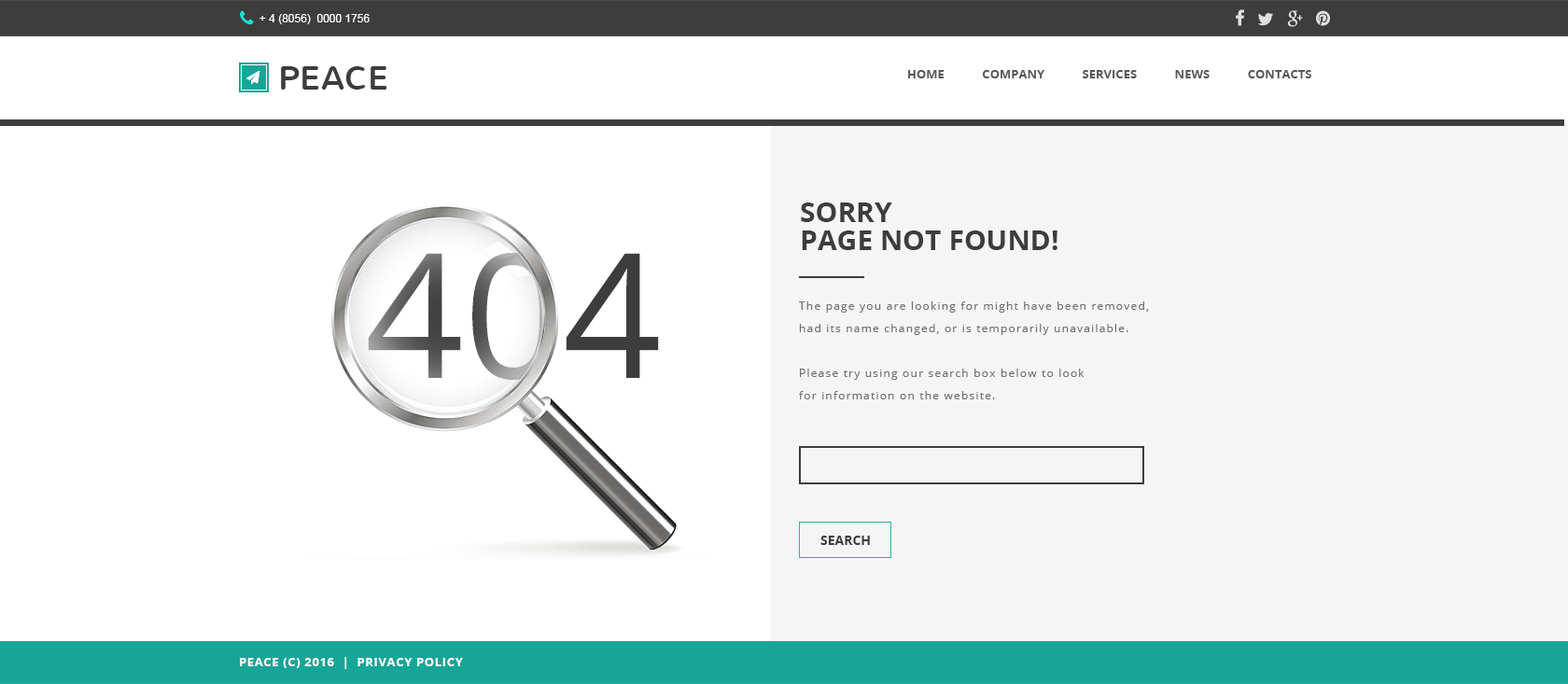
<style>
.page{position:relative;width:1568px;height:684px;background:#ffffff}
.page>*{position:absolute;margin:0}
.t1{font:11.2px "ArialMT";color:#ffffff}
.t2{font:33.6px "Nunito-Regular";color:#3d3d3d;text-transform:uppercase}
.t3{font:12.1px "OpenSans-Bold";color:#585858;text-transform:uppercase}
.t4{font:28px/28px "OpenSans-Bold";color:#3d3d3d;text-transform:uppercase}
.t5{font:172.7px "OpenSans"}
.t6{font:11.2px/22.4px "OpenSans";letter-spacing:0.1em;color:#707070}
.t7{font:13.1px "OpenSans-Bold";color:#3d3d3d;text-transform:uppercase}
.t8{font:12.1px "OpenSans-Bold";letter-spacing:0.05em;color:#ffffff;text-transform:uppercase}
</style>
<div class="page">
<p class="t1" style="left:259px;top:14px;width:111px;height:10px">+ 4 (8056)  0000 1756</p>
<p class="t2" style="left:281px;top:66px;width:106px;height:24px">Peace</p>
<p class="t3" style="left:908px;top:70px;width:403px;height:8px">Home            Company            Services            news            Contacts</p>
<p class="t4" style="left:801px;top:203px;width:256px;height:47px">Sorry<br>Page Not Found!</p>
<p class="t5" style="left:368px;top:252px;width:291px;height:128px">404</p>
<p class="t6" style="left:799px;top:301px;width:350px;height:98px">The page you are looking for might have been removed, <br>had its name changed, or is temporarily unavailable.<br><br>Please try using our search box below to look <br>for information on the website.</p>
<p class="t7" style="left:820px;top:536px;width:50px;height:9px">Search</p>
<p class="t8" style="left:240px;top:657px;width:223px;height:12px;opacity:0.95">Peace (c) 2016  |  Privacy Policy</p>
</div>
